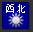
<style>
.page{position:relative;width:33px;height:32px;background:#000090}
.page>*{position:absolute;margin:0}
.t1{font:10.4px "SimSun";color:#ffffff}
</style>
<div class="page">
<p class="t1" style="left:6px;top:4px;width:19px;height:9px">西北</p>
</div>
